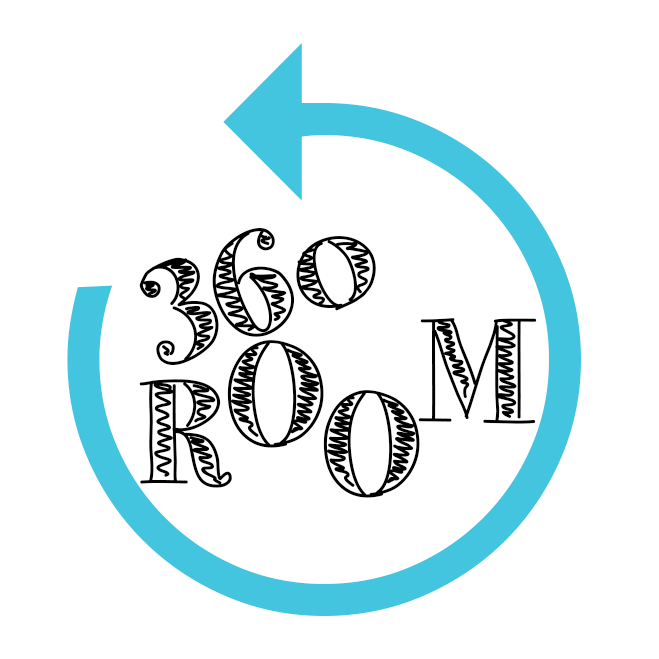
<style>
.page{position:relative;width:659px;height:659px;background:#ffffff}
.page>*{position:absolute;margin:0}
.t1{font:800px "Arrows";color:#43c5e0}
.t2{font:150px "LittleBird";color:#000000}
</style>
<div class="page">
<p class="t1" style="left:67px;top:43px;width:514px;height:573px">Y</p>
<p class="t2" style="left:139px;top:228px;width:237px;height:137px;rotate:-18deg">360</p>
<p class="t2" style="left:418px;top:318px;width:119px;height:106px;rotate:1deg">M</p>
<p class="t2" style="left:227px;top:340px;width:97px;height:108px;rotate:1deg">O</p>
<p class="t2" style="left:139px;top:379px;width:93px;height:109px;rotate:1deg">R</p>
<p class="t2" style="left:323px;top:390px;width:97px;height:108px;rotate:1deg">O</p>
</div>
